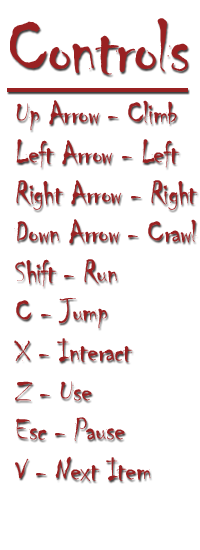
<style>
.page{position:relative;width:200px;height:550px;background:#ffffff}
.page>*{position:absolute;margin:0}
.t1{font:33px "Chiller-Regular";letter-spacing:-0.025em;color:#992122}
.t2{font:80.1px "Chiller-Regular";letter-spacing:-0.025em;color:#992122;text-decoration:underline}
</style>
<div class="page">
<p class="t1" style="left:7px;top:18px;width:191px;height:463px"><span class="t2">Controls  <br>  <br></span> Up Arrow - Climb<br> Left Arrow - Left <br> Right Arrow - Right<br> Down Arrow - Crawl<br> Shift - Run<br> C - Jump<br> X - Interact<br> Z - Use<br> Esc - Pause<br> V - Next Item</p>
</div>
